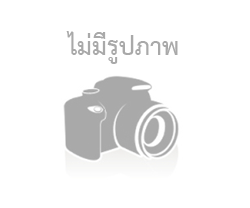
<style>
.page{position:relative;width:250px;height:208px;background:#ffffff}
.page>*{position:absolute;margin:0}
.t1{font:36px "THSarabunNew-Bold";color:#a9a9a9}
</style>
<div class="page">
<p class="t1" style="left:66px;top:31px;width:112px;height:33px">ไม่มีรูปภาพ</p>
</div>
